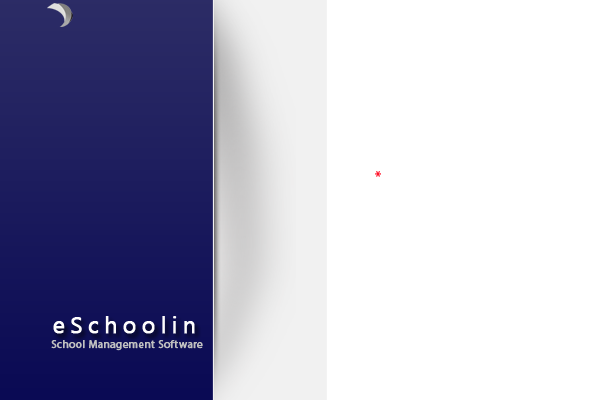
<style>
.page{position:relative;width:600px;height:400px;background:#ffffff}
.page>*{position:absolute;margin:0}
.t1{font:16px "MyriadPro-Regular";color:#ff031b}
.t2{font:23.4px "SegoeUI";letter-spacing:0.2em;color:#fefdfd;font-weight:bold}
.t3{font:10.9px "MyriadPro-Regular";letter-spacing:0.025em;color:#c0c0c0;font-weight:bold}
</style>
<div class="page">
<p class="t1" style="left:375px;top:171px;width:6px;height:6px">*</p>
<p class="t2" style="left:53px;top:316px;width:142px;height:18px">eSchoolin</p>
<p class="t3" style="left:51px;top:340px;width:152px;height:11px">School Management Software</p>
</div>
